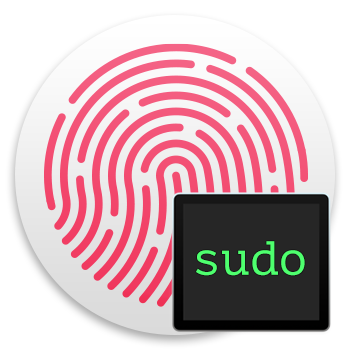
<style>
.page{position:relative;width:350px;height:350px;background:#ffffff}
.page>*{position:absolute;margin:0}
.t1{font:48px "PTMono-Regular";color:#4eff6e}
</style>
<div class="page">
<p class="t1" style="left:196px;top:241px;width:109px;height:35px">sudo</p>
</div>
